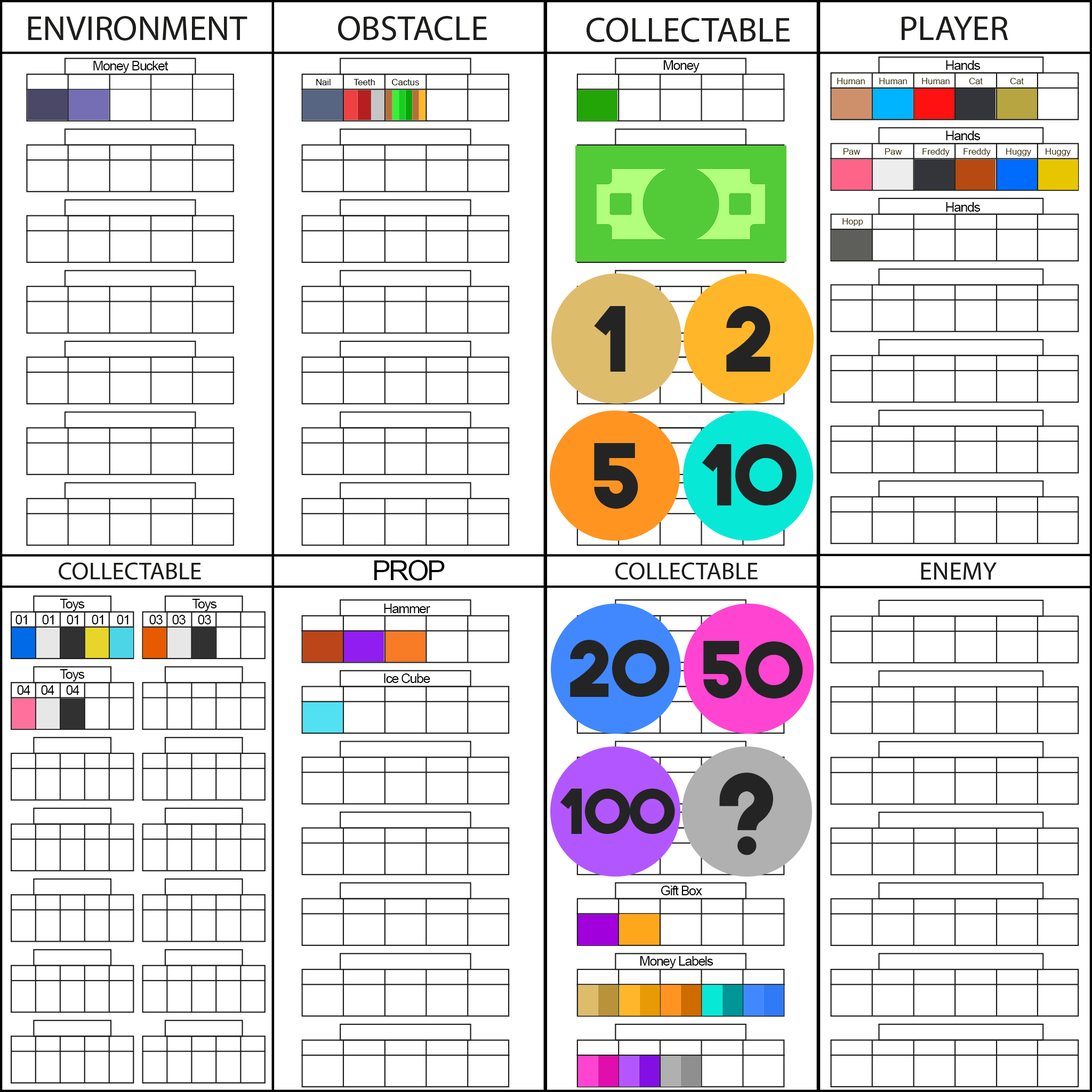
<style>
.page{position:relative;width:1092px;height:1092px;background:#ffffff}
.page>*{position:absolute;margin:0}
.t1{font:13.3px "ArialMT";letter-spacing:-0.06em;color:#000000}
.t2{font:8.9px "ArialMT";color:#3c3208}
.t3{font:8.9px "ArialMT";color:#010101}
.t4{font:88.9px "TheBoldFont";letter-spacing:-0.06em;color:#242424}
.t5{font:83.3px "TheBoldFont";color:#242424}
.t6{font:77.8px "TheBoldFont";color:#242424}
.t7{font:111.1px "TheBoldFont";color:#242424}
.t8{font:61.1px "TheBoldFont";color:#242424}
</style>
<div class="page">
<p class="t1" style="left:93px;top:61px;width:75px;height:12px">Money Bucket</p>
<p class="t1" style="left:663px;top:60px;width:37px;height:13px">Money</p>
<p class="t1" style="left:946px;top:60px;width:35px;height:10px">Hands</p>
<p class="t2" style="left:837px;top:78px;width:28px;height:6px">Human</p>
<p class="t2" style="left:879px;top:78px;width:28px;height:6px">Human</p>
<p class="t2" style="left:922px;top:78px;width:28px;height:6px">Human</p>
<p class="t2" style="left:969px;top:78px;width:14px;height:6px">Cat</p>
<p class="t2" style="left:1010px;top:78px;width:14px;height:6px">Cat</p>
<p class="t3" style="left:316px;top:79px;width:15px;height:6px">Nail</p>
<p class="t3" style="left:354px;top:79px;width:21px;height:6px">Teeth</p>
<p class="t3" style="left:392px;top:79px;width:27px;height:6px">Cactus</p>
<p class="t1" style="left:946px;top:131px;width:35px;height:9px">Hands</p>
<p class="t2" style="left:843px;top:148px;width:18px;height:7px">Paw</p>
<p class="t2" style="left:885px;top:148px;width:17px;height:7px">Paw</p>
<p class="t2" style="left:922px;top:148px;width:28px;height:8px">Freddy</p>
<p class="t2" style="left:963px;top:148px;width:28px;height:8px">Freddy</p>
<p class="t2" style="left:1006px;top:148px;width:25px;height:8px">Huggy</p>
<p class="t2" style="left:1046px;top:148px;width:25px;height:8px">Huggy</p>
<p class="t1" style="left:946px;top:202px;width:35px;height:10px">Hands</p>
<p class="t2" style="left:842px;top:218px;width:21px;height:8px">Hopp</p>
<p class="t4" style="left:594px;top:306px;width:31px;height:66px">1</p>
<p class="t4" style="left:726px;top:306px;width:44px;height:66px">2</p>
<p class="t4" style="left:594px;top:443px;width:44px;height:66px">5</p>
<p class="t5" style="left:702px;top:444px;width:95px;height:61px">10</p>
<p class="t1" style="left:60px;top:599px;width:25px;height:12px">Toys</p>
<p class="t1" style="left:192px;top:599px;width:25px;height:12px">Toys</p>
<p class="t1" style="left:384px;top:604px;width:46px;height:9px">Hammer</p>
<p class="t1" style="left:15px;top:615px;width:12px;height:9px">01</p>
<p class="t1" style="left:42px;top:615px;width:12px;height:9px">01</p>
<p class="t1" style="left:67px;top:615px;width:11px;height:9px">01</p>
<p class="t1" style="left:92px;top:615px;width:11px;height:9px">01</p>
<p class="t1" style="left:117px;top:615px;width:12px;height:9px">01</p>
<p class="t1" style="left:149px;top:615px;width:14px;height:9px">03</p>
<p class="t1" style="left:172px;top:615px;width:14px;height:9px">03</p>
<p class="t1" style="left:198px;top:615px;width:13px;height:9px">03</p>
<p class="t6" style="left:570px;top:640px;width:100px;height:57px">20</p>
<p class="t6" style="left:703px;top:641px;width:100px;height:57px">50</p>
<p class="t1" style="left:60px;top:669px;width:25px;height:12px">Toys</p>
<p class="t1" style="left:384px;top:673px;width:46px;height:10px">Ice Cube</p>
<p class="t1" style="left:17px;top:685px;width:13px;height:10px">04</p>
<p class="t1" style="left:41px;top:685px;width:13px;height:10px">04</p>
<p class="t1" style="left:66px;top:685px;width:13px;height:10px">04</p>
<p class="t7" style="left:719px;top:773px;width:54px;height:82px">?</p>
<p class="t8" style="left:560px;top:789px;width:115px;height:45px">100</p>
<p class="t1" style="left:661px;top:886px;width:41px;height:9px">Gift Box</p>
<p class="t1" style="left:640px;top:956px;width:73px;height:12px">Money Labels</p>
</div>
